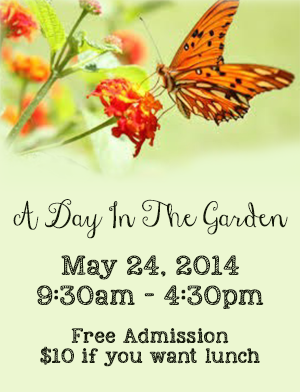
<style>
.page{position:relative;width:300px;height:392px;background:#ecf7d1}
.page>*{position:absolute;margin:0}
.t1{font:15px/20px "KGNexttoMeSketched";letter-spacing:0.01em;color:#14190a;font-weight:bold}
.t2{font:28px/48px "JandaStylishScript";letter-spacing:0.01em;color:#14190a;font-weight:bold}
.t3{font:20px/30px "KGNexttoMeSketched";letter-spacing:0.01em;color:#14190a;font-weight:bold}
</style>
<div class="page">
<p class="t1" style="left:13px;top:199px;width:275px;height:168px;text-align:center"><span class="t2">A Day In The Garden<br><br><br><br></span><span class="t3">May 24, 2014 <br>9:30am - 4:30pm<br><br><br><br></span>Free Admission<br>$10 if you want lunch</p>
</div>
